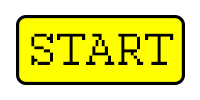
<style>
.page{position:relative;width:200px;height:100px;background:#ffffff}
.page>*{position:absolute;margin:0}
.t1{font:50px "Courier";letter-spacing:0.02em;color:#000000}
</style>
<div class="page">
<p class="t1" style="left:31px;top:33px;width:143px;height:32px">START</p>
</div>
